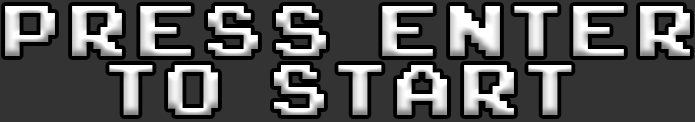
<style>
.page{position:relative;width:695px;height:122px;background:#333333}
.page>*{position:absolute;margin:0}
.t1{font:100px/58.3px "ArcadeClassic"}
</style>
<div class="page">
<p class="t1" style="left:5px;top:6px;width:685px;height:109px;text-align:center">P r e s s    e n te r<br>to    s ta r t</p>
</div>
